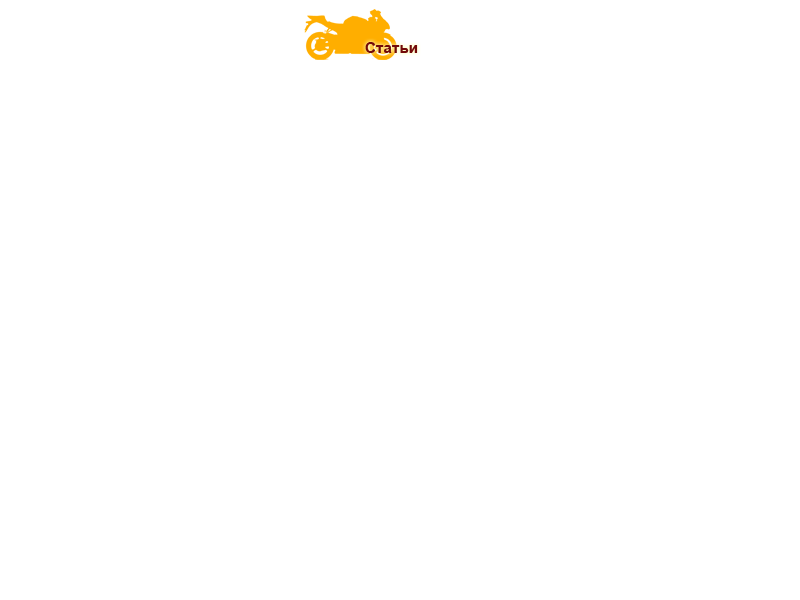
<style>
.page{position:relative;width:800px;height:600px;background:#ffffff}
.page>*{position:absolute;margin:0}
.t1{font:15.2px "Arial-BoldMT";color:#720909}
</style>
<div class="page">
<p class="t1" style="left:365px;top:42px;width:53px;height:11px">Статьи</p>
</div>
